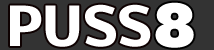
<style>
.page{position:relative;width:214px;height:50px;background:#333333}
.page>*{position:absolute;margin:0}
.t1{font:51px "Nobile-Bold";color:#ffffff}
.t2{font:56px "AlfaSlabOne-Regular";color:#ffffff}
</style>
<div class="page">
<p class="t1" style="left:10px;top:4px;width:141px;height:43px">PUSS</p>
<p class="t2" style="left:155px;top:2px;width:39px;height:46px">8</p>
</div>
